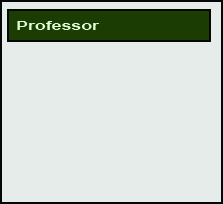
<style>
.page{position:relative;width:223px;height:204px;background:#e5ecea}
.page>*{position:absolute;margin:0}
.t1{font:12px "Arial-BoldMT";color:#e0ffd8;scale:1.48 1}
</style>
<div class="page">
<p class="t1" style="left:17px;top:21px;width:83px;height:9px">Professor</p>
</div>
